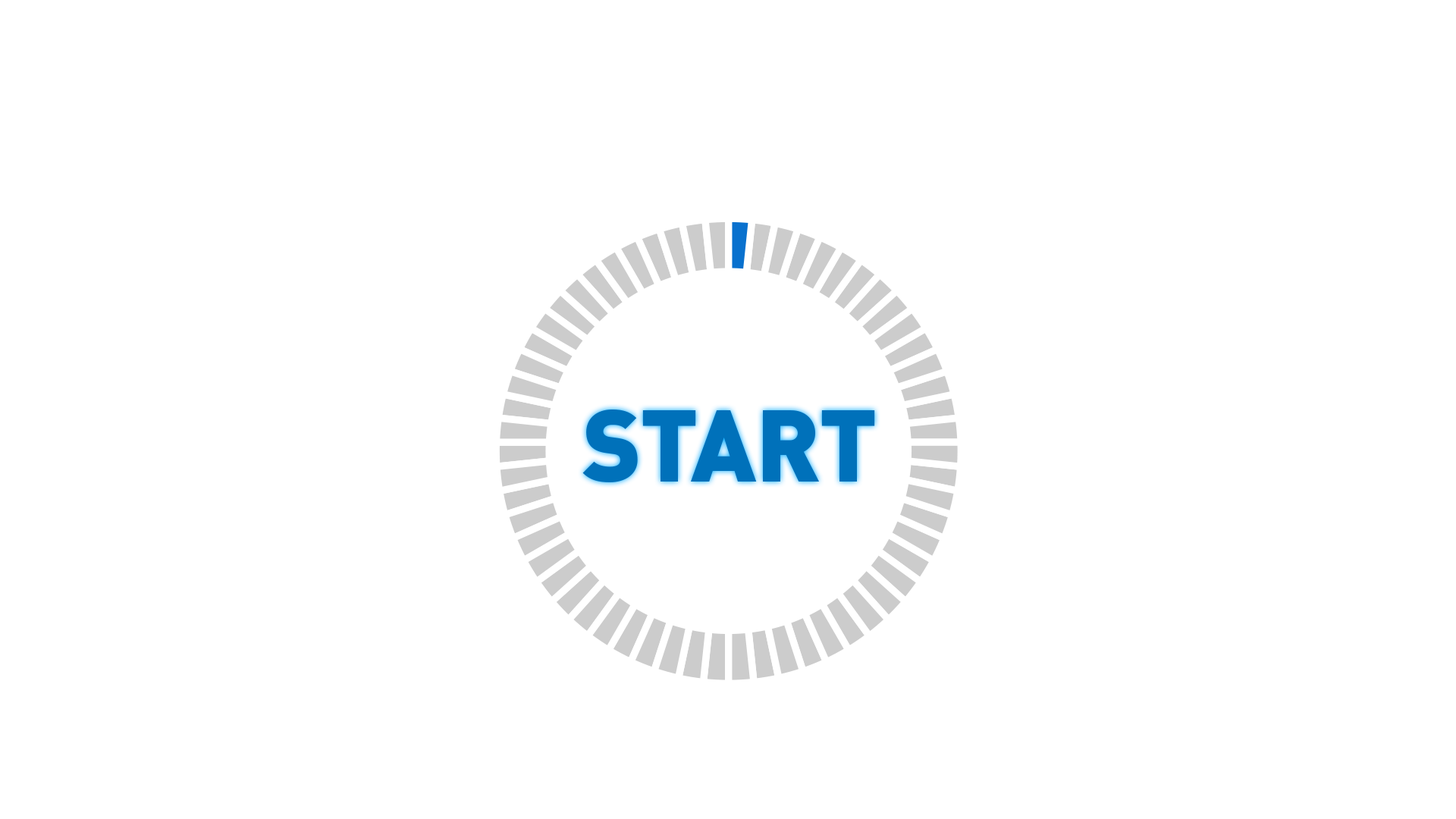
<style>
.page{position:relative;width:1456px;height:819px;background:#ffffff}
.page>*{position:absolute;margin:0}
.t1{font:100.1px "DINPro-Black";letter-spacing:-0.025em;color:#0071ba;text-transform:uppercase}
</style>
<div class="page">
<p class="t1" style="left:582px;top:409px;width:293px;height:73px">Start</p>
</div>
